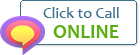
<style>
.page{position:relative;width:140px;height:55px;background:#ffffff}
.page>*{position:absolute;margin:0}
.t1{font:16px "Candara";color:#40738b}
.t2{font:20px "Candara-Bold";color:#5bae12}
</style>
<div class="page">
<p class="t1" style="left:43px;top:7px;width:76px;height:11px">Click to Call</p>
<p class="t2" style="left:53px;top:25px;width:66px;height:13px">ONLINE</p>
</div>
